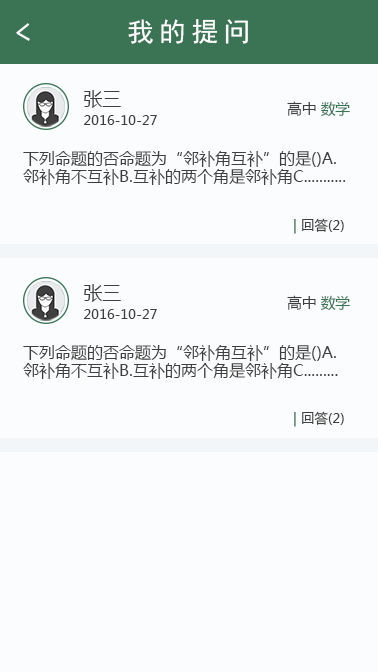
<style>
.page{position:relative;width:378px;height:672px;background:#fbfcfd}
.page>*{position:absolute;margin:0}
.t1{font:26.7px "SimHei";letter-spacing:0.2em;color:#ffffff}
.t2{font:13.3px/18.7px "MicrosoftYaHei";color:#3f3f3f}
.t3{font:18.7px/18.7px "MicrosoftYaHei";color:#3f3f3f}
.t4{font:14.7px "MicrosoftYaHei";color:#3f3f3f}
.t5{font:14.7px "MicrosoftYaHei";color:#3a7455}
.t6{font:12px/18.7px "MicrosoftYaHei";color:#3f3f3f}
.t7{font:13.3px "MicrosoftYaHei";color:#3f3f3f}
.t8{font:13.3px "MicrosoftYaHei";color:#3a7455;font-weight:bold}
</style>
<div class="page">
<p class="t1" style="left:128px;top:19px;width:120px;height:25px">我的提问</p>
<p class="t2" style="left:84px;top:90px;width:73px;height:35px"><span class="t3">张三 <br></span>2016-10-27</p>
<p class="t4" style="left:287px;top:101px;width:63px;height:16px">高中 <span class="t5">数学</span></p>
<p class="t6" style="left:23px;top:151px;width:323px;height:34px">下列命题的否命题为“邻补角互补”的是()A.邻补角不互补B.互补的两个角是邻补角C...........补角的两个角不互补<br>D.不互补的两个角不是邻补角</p>
<p class="t7" style="left:294px;top:218px;width:50px;height:16px"><span class="t8">| </span>回答(2)</p>
<p class="t2" style="left:84px;top:284px;width:73px;height:35px"><span class="t3">张三 <br></span>2016-10-27</p>
<p class="t4" style="left:287px;top:295px;width:63px;height:16px">高中 <span class="t5">数学</span></p>
<p class="t6" style="left:23px;top:345px;width:315px;height:34px">下列命题的否命题为“邻补角互补”的是()A.邻补角不互补B.互补的两个角是邻补角C.........补角的两个角不互补<br>D.不互补的两个角不是邻补角</p>
<p class="t7" style="left:294px;top:411px;width:50px;height:16px"><span class="t8">| </span>回答(2)</p>
</div>
